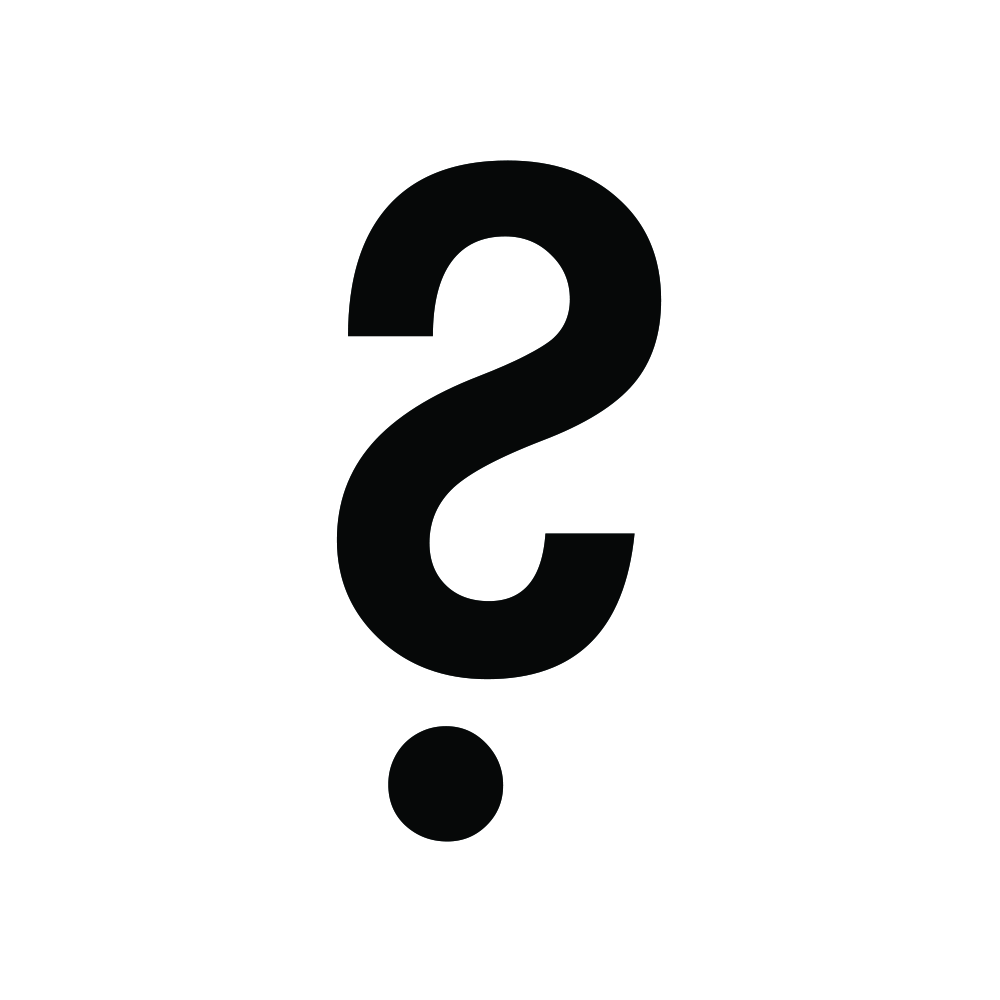
<style>
.page{position:relative;width:1000px;height:1000px;background:#ffffff}
.page>*{position:absolute;margin:0}
.t1{font:877px "Futura-MediumItalic";color:#060808}
</style>
<div class="page">
<p class="t1" style="left:336px;top:160px;width:326px;height:682px">?</p>
</div>
